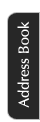
<style>
.page{position:relative;width:40px;height:122px;background:#272727}
.page>*{position:absolute;margin:0}
.t1{font:14.6px "Optima-Regular";color:#ffffff}
</style>
<div class="page">
<p class="t1" style="left:17px;top:21px;width:12px;height:87px;rotate:-90deg">Address Book</p>
</div>
